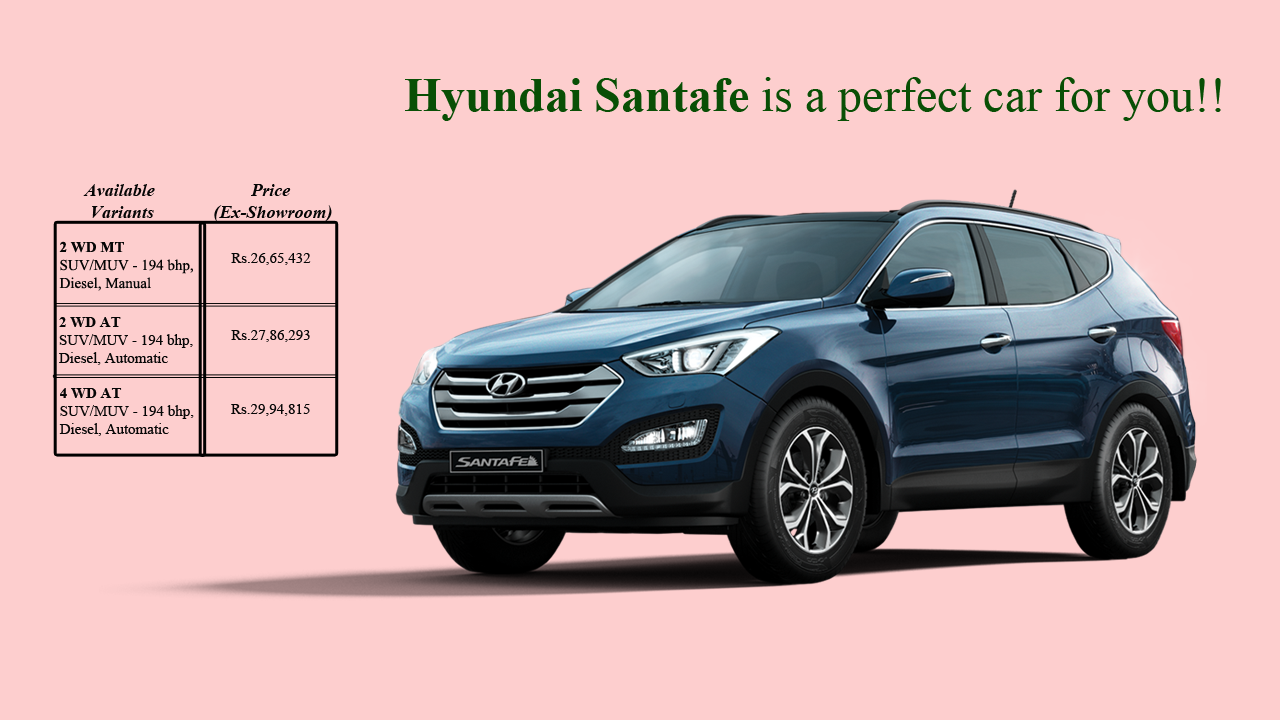
<style>
.page{position:relative;width:1280px;height:720px;background:#fdcece}
.page>*{position:absolute;margin:0}
.t1{font:48px "TimesNewRomanPSMT";color:#094f05}
.t2{font:48px "TimesNewRomanPS-BoldMT";color:#094f05}
.t3{font:18px "TimesNewRomanPS-BoldItalicMT";color:#060606}
.t4{font:15px "TimesNewRomanPSMT";color:#060606}
.t5{font:15px "TimesNewRomanPS-BoldMT";color:#060606}
</style>
<div class="page">
<p class="t1" style="left:405px;top:77px;width:816px;height:44px"><span class="t2">Hyundai Santafe</span> is a perfect car for you!!</p>
<p class="t3" style="left:83px;top:184px;width:72px;height:34px;text-align:center">Available <br>Variants</p>
<p class="t3" style="left:214px;top:184px;width:118px;height:38px;text-align:center">Price <br>(Ex-Showroom)</p>
<p class="t4" style="left:59px;top:241px;width:134px;height:50px"><span class="t5">2 WD MT<br></span>SUV/MUV - 194 bhp, <br>Diesel, Manual</p>
<p class="t4" style="left:231px;top:253px;width:80px;height:12px">Rs.26,65,432</p>
<p class="t4" style="left:59px;top:317px;width:134px;height:48px"><span class="t5">2 WD AT<br></span>SUV/MUV - 194 bhp, <br>Diesel, Automatic</p>
<p class="t4" style="left:231px;top:330px;width:79px;height:12px">Rs.27,86,293</p>
<p class="t4" style="left:59px;top:388px;width:135px;height:48px"><span class="t5">4 WD AT<br></span>SUV/MUV - 194 bhp, <br>Diesel, Automatic</p>
<p class="t4" style="left:231px;top:404px;width:79px;height:12px">Rs.29,94,815</p>
</div>
